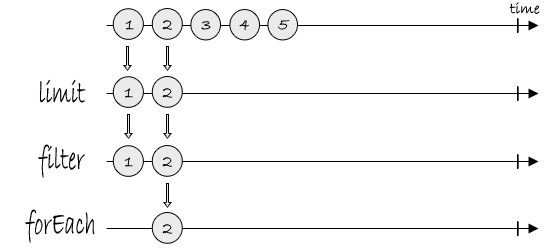
<style>
.page{position:relative;width:550px;height:250px;background:#ffffff}
.page>*{position:absolute;margin:0}
.t1{font:15.9px "BradleyHandITC";color:#000000}
.t2{font:16.7px "BradleyHandITC";color:#000000}
.t3{font:33.3px "BradleyHandITC";color:#000000;scale:0.66 1}
</style>
<div class="page">
<p class="t1" style="left:509px;top:2px;width:31px;height:12px">time</p>
<p class="t2" style="left:125px;top:20px;width:9px;height:10px">1</p>
<p class="t2" style="left:162px;top:20px;width:10px;height:10px">2</p>
<p class="t2" style="left:201px;top:21px;width:10px;height:9px">3</p>
<p class="t2" style="left:239px;top:20px;width:10px;height:11px">4</p>
<p class="t2" style="left:278px;top:20px;width:12px;height:10px">5</p>
<p class="t3" style="left:39px;top:79px;width:47px;height:24px">limit</p>
<p class="t2" style="left:124px;top:88px;width:9px;height:10px">1</p>
<p class="t2" style="left:162px;top:88px;width:10px;height:10px">2</p>
<p class="t3" style="left:38px;top:144px;width:47px;height:34px">filter</p>
<p class="t2" style="left:124px;top:157px;width:9px;height:10px">1</p>
<p class="t2" style="left:162px;top:157px;width:10px;height:10px">2</p>
<p class="t3" style="left:25px;top:209px;width:70px;height:34px;text-align:right">forEach<br>h</p>
<p class="t2" style="left:162px;top:224px;width:10px;height:10px">2</p>
</div>
